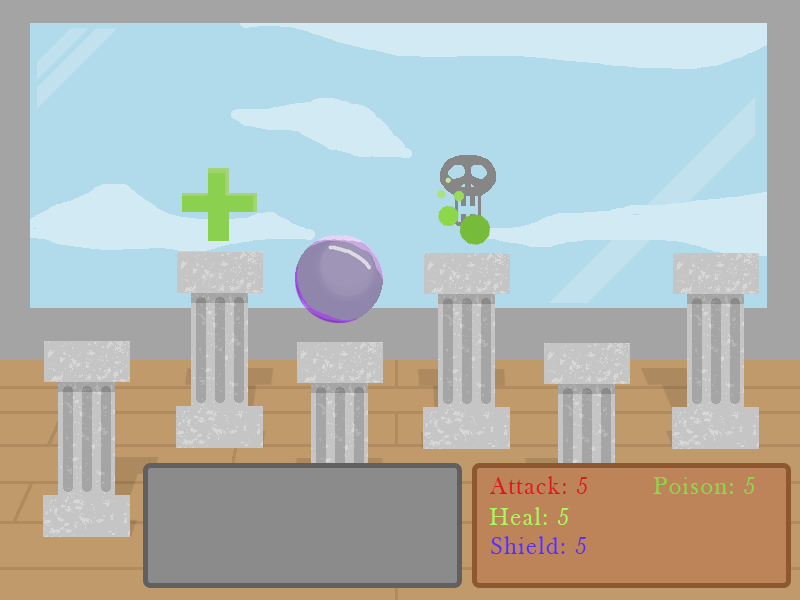
<style>
.page{position:relative;width:800px;height:600px;background:#b1daeb}
.page>*{position:absolute;margin:0}
.t1{font:25.8px "BaskOldFace";letter-spacing:0.07em;color:#dc1a1a;scale:0.93 1}
.t2{font:25.8px "BaskOldFace";letter-spacing:0.07em;color:#8dd74a;scale:0.93 1}
.t3{font:25.8px "BaskOldFace";letter-spacing:0.07em;color:#a8f960;scale:0.93 1}
.t4{font:25.8px "BaskOldFace";letter-spacing:0.07em;color:#552dff;scale:0.93 1}
</style>
<div class="page">
<p class="t1" style="left:489px;top:476px;width:99px;height:18px">Attack: 5</p>
<p class="t2" style="left:653px;top:477px;width:102px;height:17px">Poison: 5</p>
<p class="t3" style="left:489px;top:507px;width:80px;height:18px">Heal: 5</p>
<p class="t4" style="left:491px;top:536px;width:95px;height:18px">Shield: 5</p>
</div>
